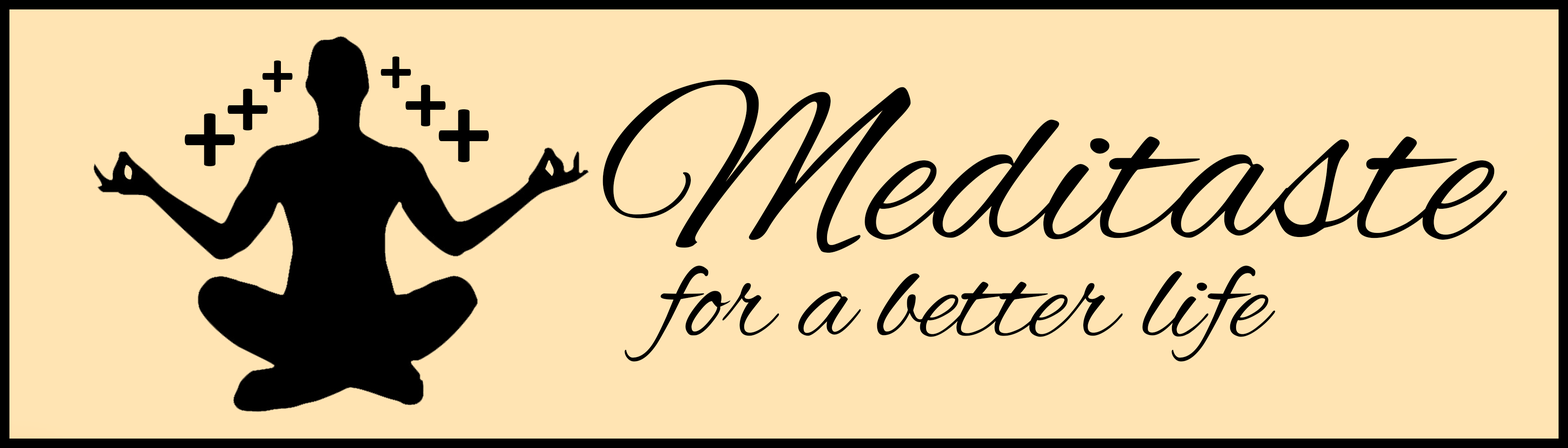
<style>
.page{position:relative;width:1568px;height:448px;background:#ffe4b3}
.page>*{position:absolute;margin:0}
.t1{font:67.2px "Calibri-Bold";color:#000000}
.t2{font:89.6px "Calibri-Bold";color:#000000}
.t3{font:240.9px "AlexBrush-Regular";color:#000000}
.t4{font:112px "Calibri-Bold";color:#000000}
.t5{font:128.5px "AlexBrush-Regular";color:#000000}
</style>
<div class="page">
<p class="t1" style="left:262px;top:60px;width:31px;height:32px">+</p>
<p class="t1" style="left:381px;top:56px;width:30px;height:32px;rotate:180deg">+</p>
<p class="t2" style="left:228px;top:89px;width:40px;height:41px">+</p>
<p class="t2" style="left:405px;top:85px;width:41px;height:41px;rotate:180deg">+</p>
<p class="t3" style="left:603px;top:79px;width:905px;height:174px">Meditaste</p>
<p class="t4" style="left:185px;top:113px;width:50px;height:53px">+</p>
<p class="t4" style="left:439px;top:109px;width:50px;height:53px;rotate:180deg">+</p>
<p class="t5" style="left:625px;top:266px;width:650px;height:96px">for a better life</p>
</div>
